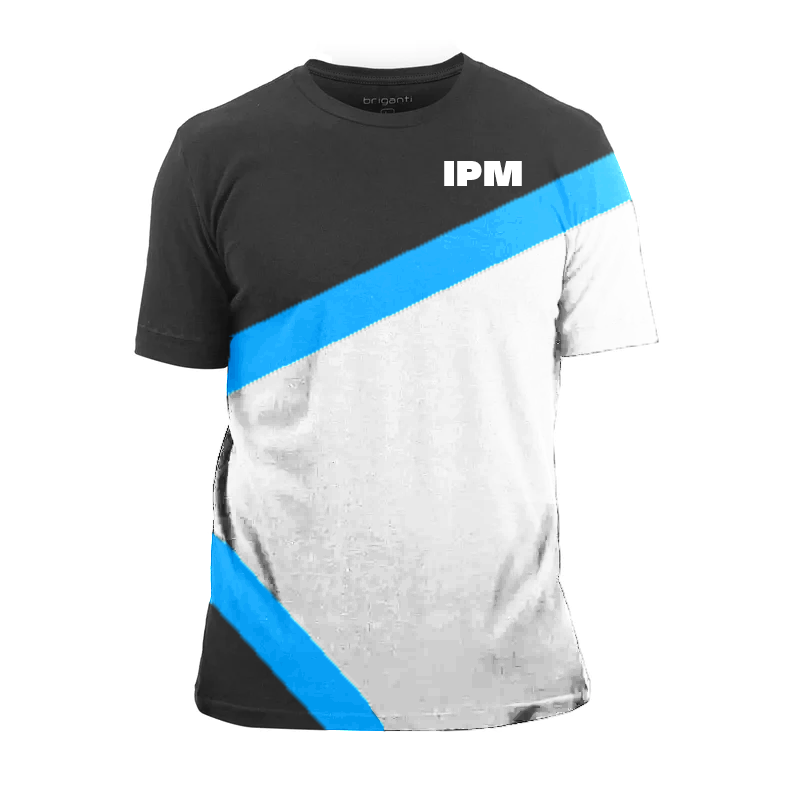
<style>
.page{position:relative;width:800px;height:800px;background:#ffffff}
.page>*{position:absolute;margin:0}
.t1{font:36.2px "MADESoulmaze";color:#ffffff}
</style>
<div class="page">
<p class="t1" style="left:444px;top:161px;width:78px;height:25px">IPM</p>
</div>
